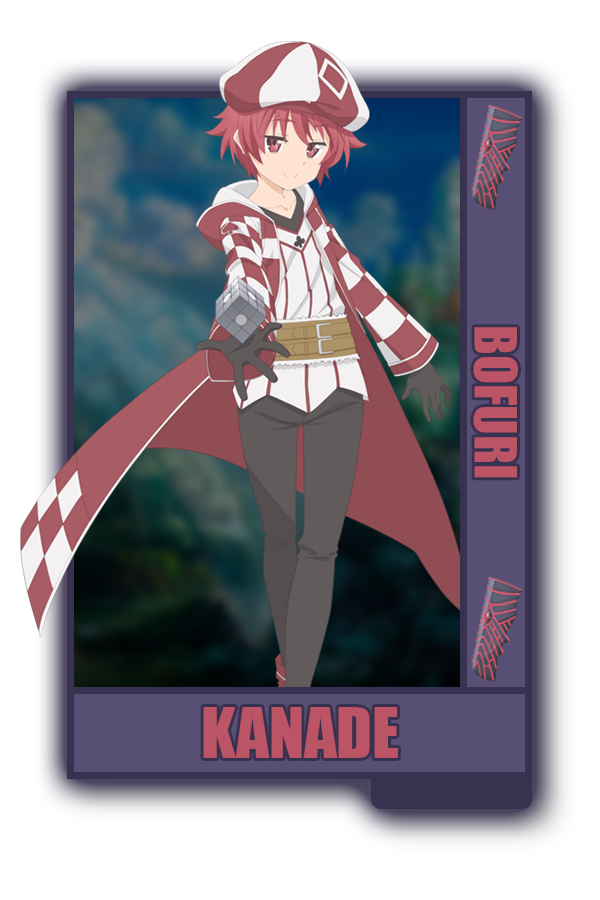
<style>
.page{position:relative;width:600px;height:900px;background:#ffffff}
.page>*{position:absolute;margin:0}
.t1{font:53.6px "Impact";color:#bb5464}
.t2{font:64.6px "Impact";color:#bb5464}
</style>
<div class="page">
<p class="t1" style="left:473px;top:327px;width:45px;height:151px;rotate:90deg">BOFURI</p>
<p class="t2" style="left:203px;top:707px;width:195px;height:51px">KANADE</p>
</div>
